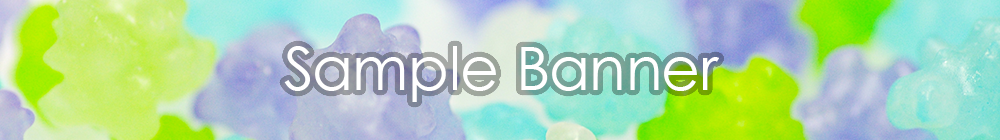
<style>
.page{position:relative;width:1000px;height:140px}
.page>*{position:absolute;margin:0}
.t1{font:60px "CenturyGothic";color:#ffffff}
</style>
<div class="page">
<p class="t1" style="left:284px;top:46px;width:435px;height:56px">Sample Banner</p>
</div>
